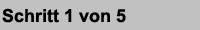
<style>
.page{position:relative;width:200px;height:30px;background:#c1c1c1}
.page>*{position:absolute;margin:0}
.t1{font:18px "Arial-BoldMT";color:#000000}
</style>
<div class="page">
<p class="t1" style="left:2px;top:8px;width:124px;height:15px">Schritt 1 von 5</p>
</div>
